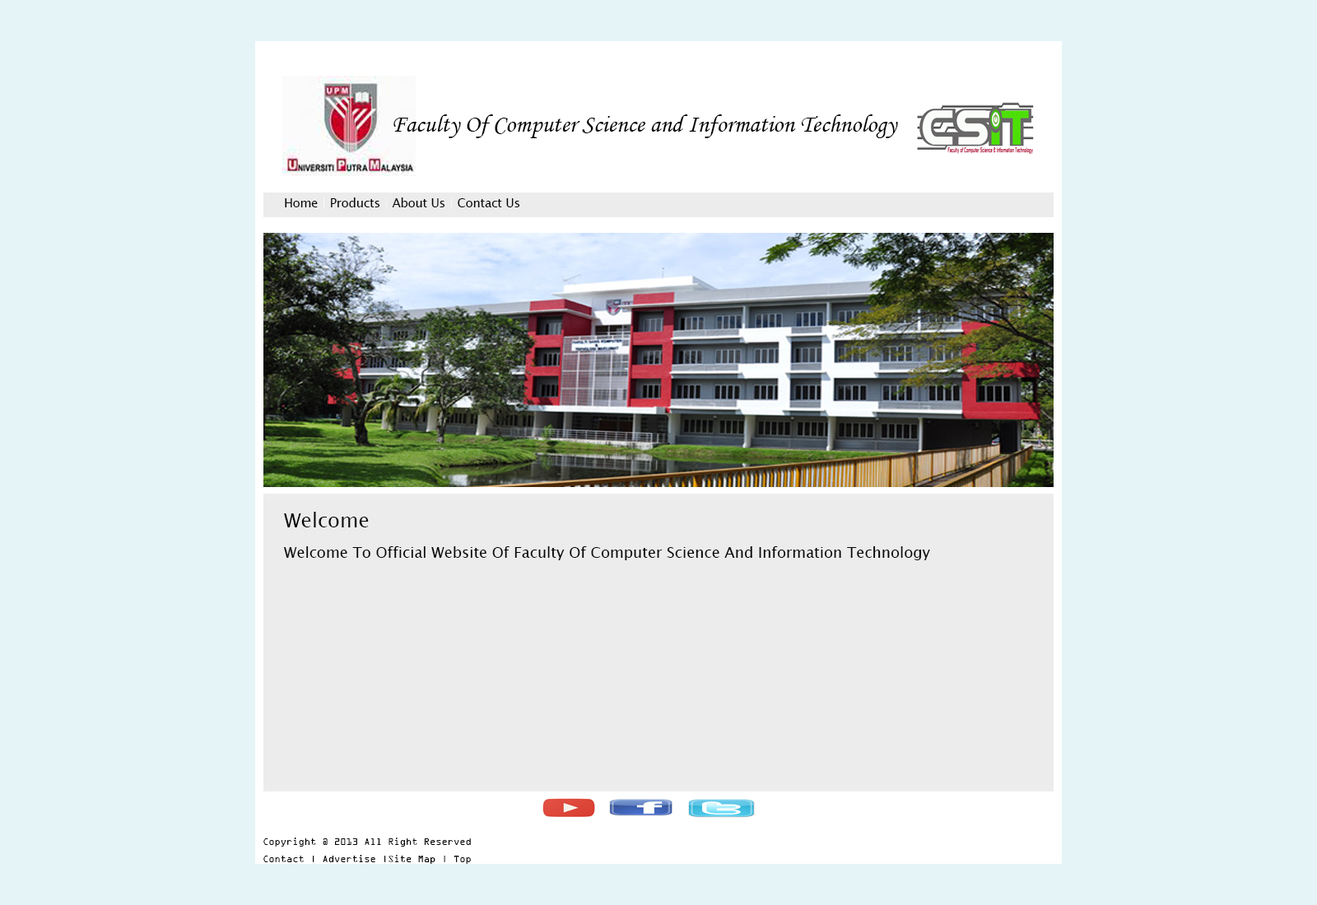
<style>
.page{position:relative;width:1317px;height:905px;background:#e5f5f7}
.page>*{position:absolute;margin:0}
.t1{font:24.7px "MonotypeCorsiva";color:#000000}
.t2{font:9.9px "SimSun";color:#000000}
.t3{font:11.9px "LucidaSansUnicode";color:#080707}
.t4{font:11.9px "LucidaSansUnicode";color:#fdfbfb}
.t5{font:11.9px "LucidaSansUnicode";color:#fbf4f4}
.t6{font:11.9px "LucidaSansUnicode";color:#fcfafa}
.t7{font:14.8px "LucidaSansUnicode";color:#080707}
.t8{font:19.8px "LucidaSansUnicode";color:#080707}
.t9{font:9.9px "OCRAExtended";color:#080707}
</style>
<div class="page">
<p class="t1" style="left:393px;top:114px;width:505px;height:24px"><span class="t2"> </span>Faculty Of Computer Science and Information Technology</p>
<p class="t3" style="left:285px;top:198px;width:235px;height:11px">Home <span class="t4">|</span> Products <span class="t5">|</span> About Us <span class="t6">|</span> Contact Us</p>
<p class="t7" style="left:284px;top:512px;width:646px;height:49px"><span class="t8">Welcome<br></span>Welcome To Official Website Of Faculty Of Computer Science And Information Technology</p>
<p class="t9" style="left:263px;top:838px;width:208px;height:26px">Copyright @ 2013 All Right Reserved<br>Contact | Advertise |Site Map | Top</p>
</div>
